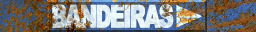
<style>
.page{position:relative;width:256px;height:32px}
.page>*{position:absolute;margin:0}
.t1{font:30.7px "Arial-Black";letter-spacing:-0.1em;text-transform:uppercase;font-weight:bold;scale:0.67 1}
</style>
<div class="page">
<p class="t1" style="left:52px;top:4px;width:122px;height:24px">bandeiras</p>
</div>
